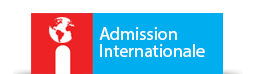
<style>
.page{position:relative;width:255px;height:74px;background:#ffffff}
.page>*{position:absolute;margin:0}
.t1{font:18.3px/17.1px "MyriadPro-Regular";color:#ffffff}
</style>
<div class="page">
<p class="t1" style="left:99px;top:27px;width:106px;height:30px">Admission<br>Internationale</p>
</div>
